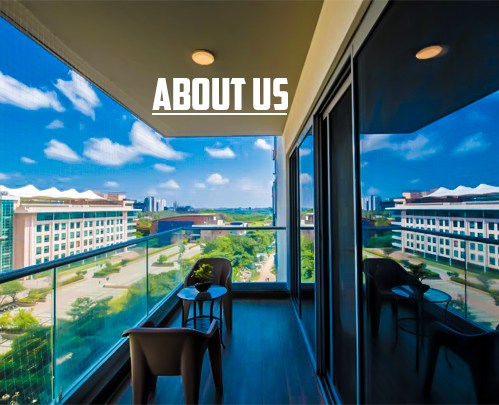
<style>
.page{position:relative;width:499px;height:405px}
.page>*{position:absolute;margin:0}
.t1{font:44.8px "AmericanCaptain";color:#ffffff;text-transform:uppercase}
</style>
<div class="page">
<p class="t1" style="left:152px;top:78px;width:136px;height:32px">About us</p>
</div>
